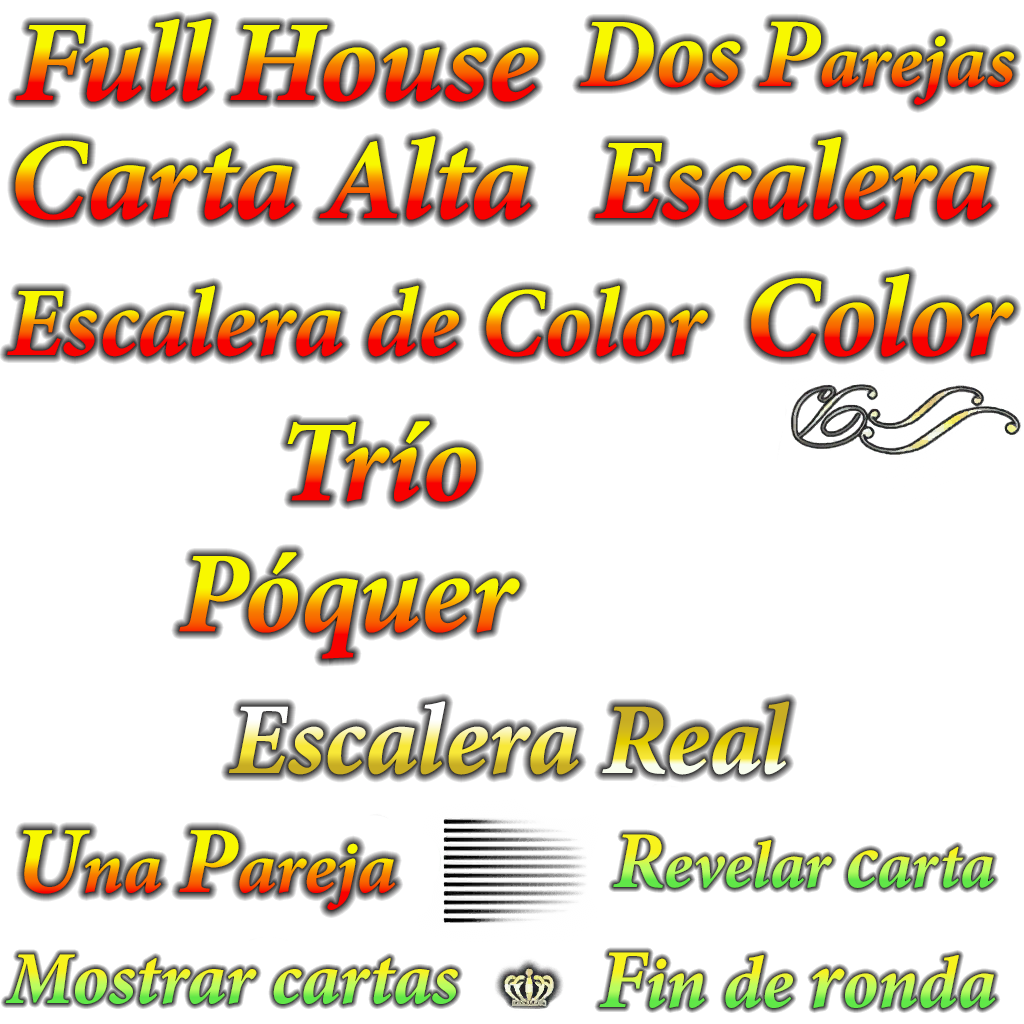
<style>
.page{position:relative;width:1024px;height:1024px;background:#ffffff}
.page>*{position:absolute;margin:0}
.t1{font:115.4px "MinionPro-BoldIt";scale:1.04 1}
.t2{font:76.1px "MinionPro-BoldIt";scale:1.03 1}
.t3{font:98.5px "MinionPro-BoldIt";scale:1.03 1}
.t4{font:116.2px "MinionPro-BoldIt"}
.t5{font:115.3px "MinionPro-BoldIt"}
.t6{font:98.4px "MinionPro-BoldIt"}
.t7{font:101.8px "MinionPro-BoldIt"}
.t8{font:73.5px "MinionPro-BoldIt"}
.t9{font:95.1px "MinionPro-BoldIt"}
.t10{font:66.8px "MinionPro-BoldIt"}
.t11{font:80.7px "MinionPro-BoldIt"}
.t12{font:73.9px "MinionPro-BoldIt"}
.t13{font:84px "MinionPro-BoldIt"}
.t14{font:74.8px "MinionPro-BoldIt"}
</style>
<div class="page">
<p class="t1" style="left:15px;top:19px;width:524px;height:83px">Full House</p>
<p class="t2" style="left:580px;top:21px;width:435px;height:84px"><span class="t3">Dos P</span>arejas</p>
<p class="t4" style="left:15px;top:136px;width:516px;height:84px">Carta Alta</p>
<p class="t5" style="left:595px;top:137px;width:397px;height:83px">Escalera</p>
<p class="t5" style="left:751px;top:274px;width:263px;height:83px">Color</p>
<p class="t6" style="left:7px;top:285px;width:701px;height:72px">Escalera de Color</p>
<p class="t5" style="left:287px;top:421px;width:189px;height:81px">Trío</p>
<p class="t5" style="left:179px;top:552px;width:341px;height:107px">Póquer</p>
<p class="t7" style="left:229px;top:701px;width:350px;height:74px">Escalera</p>
<p class="t7" style="left:602px;top:701px;width:188px;height:74px">Real</p>
<p class="t8" style="left:23px;top:830px;width:373px;height:80px"><span class="t9">U</span>na <span class="t9">P</span>areja</p>
<p class="t10" style="left:613px;top:834px;width:381px;height:54px"><span class="t11">R</span>evelar <span class="t11">c</span>arta</p>
<p class="t12" style="left:599px;top:952px;width:397px;height:56px"><span class="t13">F</span>in de <span class="t13">r</span>onda</p>
<p class="t14" style="left:5px;top:954px;width:453px;height:50px">Mostrar cartas</p>
</div>
